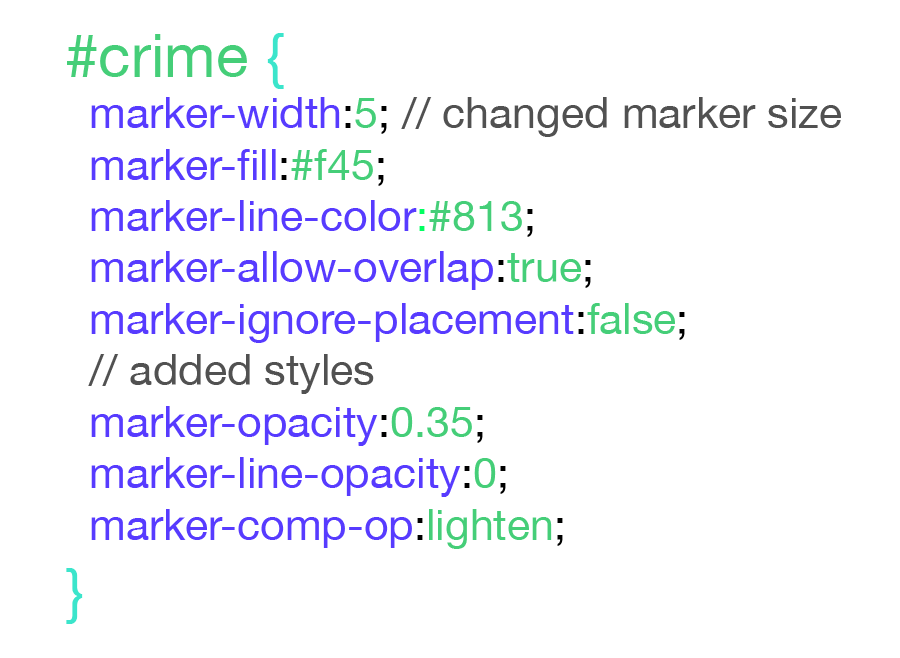
<style>
.page{position:relative;width:900px;height:658px;background:#ffffff}
.page>*{position:absolute;margin:0}
.t1{font:42.9px "HelveticaNeue";color:#573bff}
.t2{font:60.1px "HelveticaNeue";color:#45ce78}
.t3{font:60.1px "HelveticaNeue";color:#3be5cb}
.t4{font:42.9px "HelveticaNeue";color:#000000}
.t5{font:42.9px "HelveticaNeue";color:#45ce78}
.t6{font:42.9px "HelveticaNeue";color:#515151}
.t7{font:42.9px "HelveticaNeue";color:#00ff60}
.t8{font:42.9px "HelveticaNeue";color:#000100}
</style>
<div class="page">
<p class="t1" style="left:66px;top:33px;width:775px;height:591px"><span class="t2">#crime </span><span class="t3">{<br>  </span>marker-width<span class="t4">:</span><span class="t5">5</span><span class="t4">; </span><span class="t6">// changed marker size<br>  </span>marker-fill<span class="t4">:</span><span class="t5">#f45</span><span class="t4">;<br>  </span>marker-line-color<span class="t7">:</span><span class="t5">#813</span><span class="t4">;<br> </span> marker-allow-overlap<span class="t8">:</span><span class="t5">true</span><span class="t4">;<br>  </span>marker-ignore-placement<span class="t4">:</span><span class="t5">false</span><span class="t4">;<br>  </span><span class="t6">// added styles<br>  </span>marker-opacity<span class="t8">:</span><span class="t5">0.35</span><span class="t4">;<br>  </span>marker-line-opacity<span class="t4">:</span><span class="t5">0</span><span class="t4">;<br>  </span>marker-comp-op<span class="t4">:</span><span class="t5">lighten</span><span class="t8">;<br></span><span class="t3">}</span></p>
</div>
